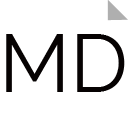
<style>
.page{position:relative;width:128px;height:128px;background:#ffffff}
.page>*{position:absolute;margin:0}
.t1{font:81px "Raleway";color:#060202}
</style>
<div class="page">
<p class="t1" style="left:6px;top:34px;width:119px;height:58px">MD</p>
</div>
